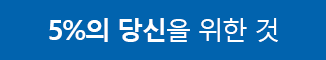
<style>
.page{position:relative;width:326px;height:60px;background:#0163ae}
.page>*{position:absolute;margin:0}
.t1{font:26px "MalgunGothic";letter-spacing:-0.06em;color:#ffffff}
.t2{font:28px "MalgunGothicBold";letter-spacing:-0.06em;color:#ffffff}
.t3{font:26px "MalgunGothicBold";letter-spacing:-0.06em;color:#ffffff}
</style>
<div class="page">
<p class="t1" style="left:49px;top:18px;width:229px;height:24px"><span class="t2">5%</span><span class="t3">의 당신</span>을 위한 것</p>
</div>
